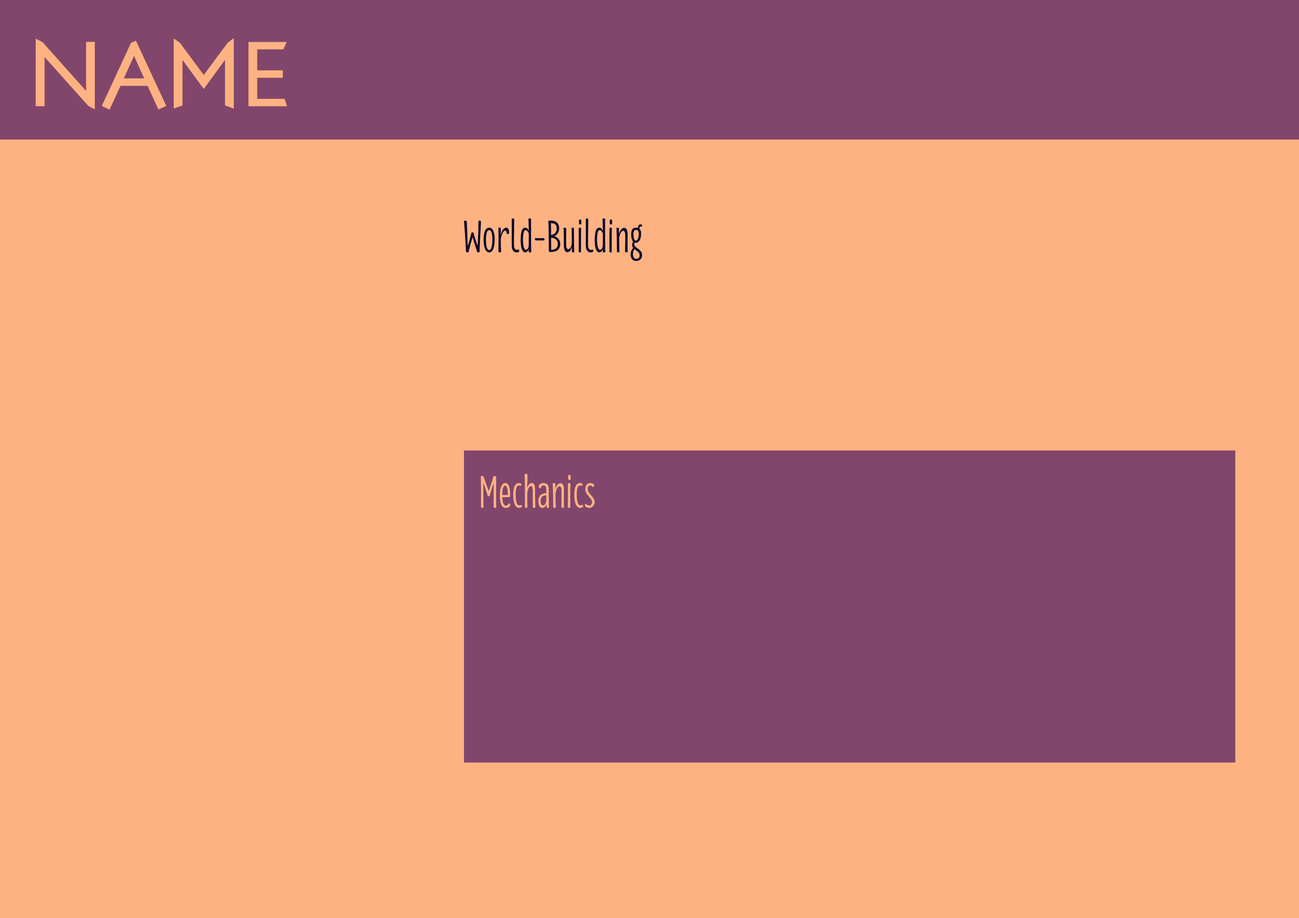
<style>
.page{position:relative;width:1299px;height:918px;background:#feb282}
.page>*{position:absolute;margin:0}
.t1{font:92.6px "LondonBetween";color:#feb282}
.t2{font:46.3px "Florence-Regular";color:#0e0a2b}
.t3{font:46.3px "Florence-Regular";color:#feb282}
</style>
<div class="page">
<p class="t1" style="left:36px;top:38px;width:251px;height:72px">NAME</p>
<p class="t2" style="left:464px;top:218px;width:178px;height:43px">World-Building</p>
<p class="t3" style="left:481px;top:474px;width:114px;height:34px">Mechanics</p>
</div>
